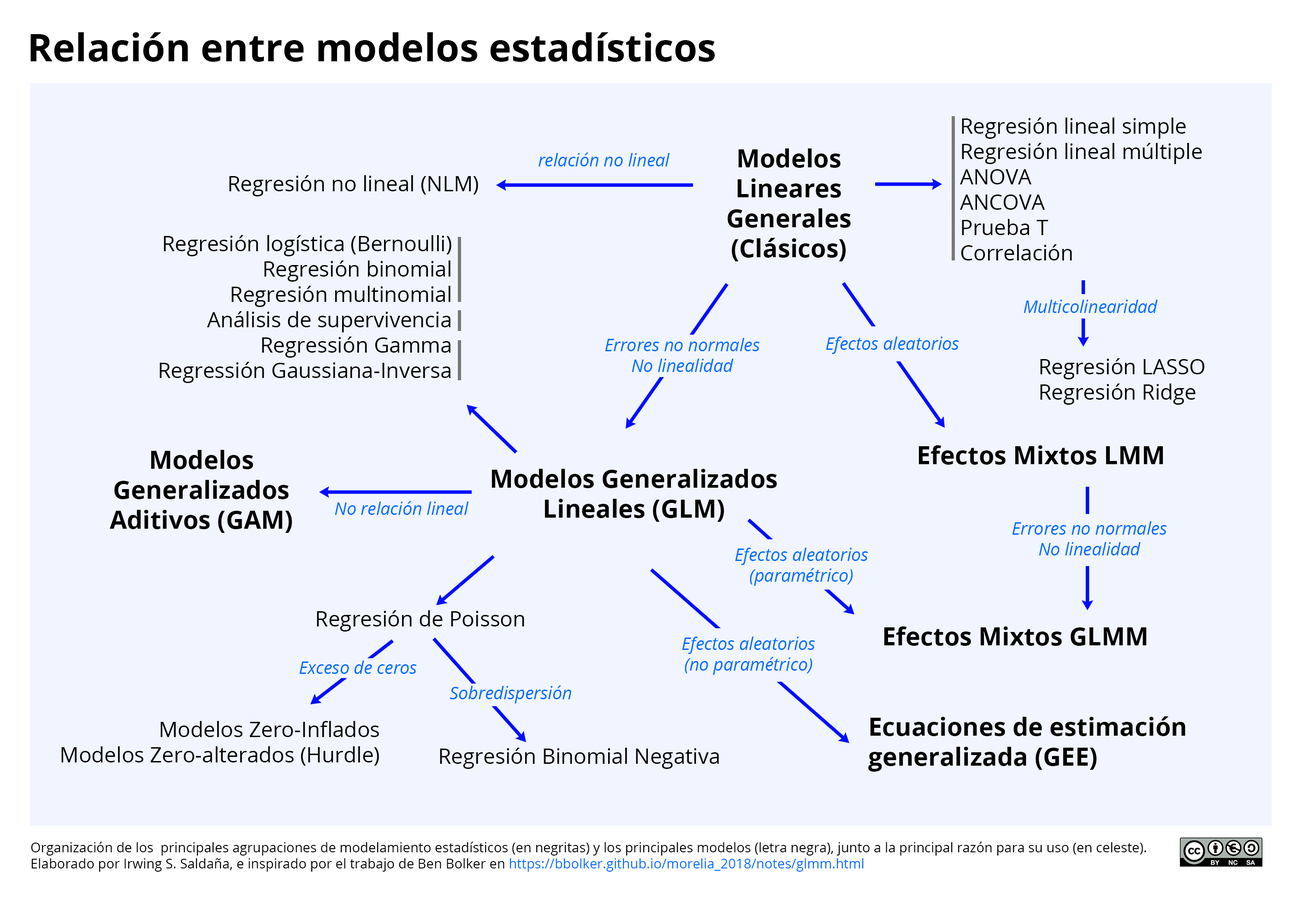
<style>
.page{position:relative;width:1303px;height:915px;background:#f0f5ff}
.page>*{position:absolute;margin:0}
.t1{font:38.4px "OpenSans-Bold";color:#000000}
.t2{font:21.1px "OpenSans-Regular";color:#000000}
.t3{font:25px "OpenSans-Bold";color:#000000}
.t4{font:17.3px "OpenSans-Italic";color:#006cff}
.t5{font:13.4px "OpenSans-Regular";color:#000000}
.t6{font:13.4px "OpenSans-Regular";color:#006cff}
</style>
<div class="page">
<p class="t1" style="left:30px;top:32px;width:685px;height:30px">Relación entre modelos estadísticos</p>
<p class="t2" style="left:960px;top:118px;width:242px;height:142px">Regresión lineal simple<br>Regresión lineal múltiple<br>ANOVA<br>ANCOVA<br>Prueba T<br>Correlación</p>
<p class="t3" style="left:728px;top:148px;width:123px;height:113px;text-align:center">Modelos <br>Lineares <br>Generales  <br>(Clásicos)</p>
<p class="t4" style="left:539px;top:153px;width:131px;height:13px">relación no lineal</p>
<p class="t2" style="left:229px;top:175px;width:249px;height:21px">Regresión no lineal (NLM)</p>
<p class="t2" style="left:160px;top:235px;width:291px;height:148px;text-align:right">Regresión logística (Bernoulli)<br>Regresión binomial<br>Regresión multinomial<br>Análisis de supervivencia<br>Regressión Gamma<br>Regressión Gaussiana-Inversa</p>
<p class="t4" style="left:1024px;top:300px;width:134px;height:13px">Multicolinearidad</p>
<p class="t4" style="left:605px;top:338px;width:155px;height:34px;text-align:center">Errores no normales<br>No linealidad</p>
<p class="t4" style="left:826px;top:337px;width:133px;height:17px">Efectos aleatorios</p>
<p class="t2" style="left:1040px;top:358px;width:164px;height:47px">Regresión LASSO<br>Regresión Ridge</p>
<p class="t3" style="left:110px;top:450px;width:182px;height:83px;text-align:center">Modelos <br>Generalizados <br>Aditivos (GAM)</p>
<p class="t3" style="left:918px;top:445px;width:245px;height:20px">Efectos Mixtos LMM</p>
<p class="t3" style="left:491px;top:469px;width:286px;height:53px;text-align:center">Modelos Generalizados Lineales (GLM)</p>
<p class="t4" style="left:335px;top:501px;width:134px;height:14px">No relación lineal</p>
<p class="t4" style="left:1012px;top:521px;width:155px;height:35px;text-align:center">Errores no normales<br>No linealidad</p>
<p class="t4" style="left:735px;top:548px;width:133px;height:38px;text-align:center">Efectos aleatorios<br>(paramétrico)</p>
<p class="t2" style="left:317px;top:610px;width:207px;height:22px">Regresión de Poisson</p>
<p class="t3" style="left:884px;top:627px;width:263px;height:19px">Efectos Mixtos GLMM</p>
<p class="t4" style="left:682px;top:637px;width:133px;height:38px;text-align:center">Efectos aleatorios<br>(no paramétrico)</p>
<p class="t4" style="left:299px;top:661px;width:118px;height:13px">Exceso de ceros</p>
<p class="t4" style="left:450px;top:686px;width:121px;height:18px">Sobredispersión</p>
<p class="t2" style="left:61px;top:721px;width:318px;height:45px;text-align:right">Modelos Zero-Inflados<br>Modelos Zero-alterados (Hurdle)</p>
<p class="t3" style="left:868px;top:716px;width:317px;height:56px">Ecuaciones de estimación generalizada (GEE)</p>
<p class="t2" style="left:440px;top:748px;width:279px;height:21px">Regresión Binomial Negativa</p>
<p class="t5" style="left:31px;top:842px;width:1115px;height:30px">Organización de los  principales agrupaciones de modelamiento estadísticos (en negritas) y los principales modelos (letra negra), junto a la principal razón para su uso (en celeste). <br>Elaborado por Irwing S. Saldaña, e inspirado por el trabajo de Ben Bolker en<span class="t6"> https://bbolker.github.io/morelia_2018/notes/glmm.html</span></p>
</div>
